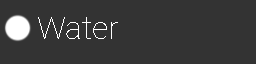
<style>
.page{position:relative;width:256px;height:64px;background:#333333}
.page>*{position:absolute;margin:0}
.t1{font:32px "Roboto-Thin";color:#ffffff}
</style>
<div class="page">
<p class="t1" style="left:38px;top:17px;width:80px;height:22px">Water</p>
</div>
